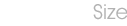
<style>
.page{position:relative;width:127px;height:26px;background:#ffffff}
.page>*{position:absolute;margin:0}
.t1{font:20px "Atlanta-Book";color:#b2b2b2}
</style>
<div class="page">
<p class="t1" style="left:93px;top:4px;width:35px;height:16px">Size</p>
</div>
